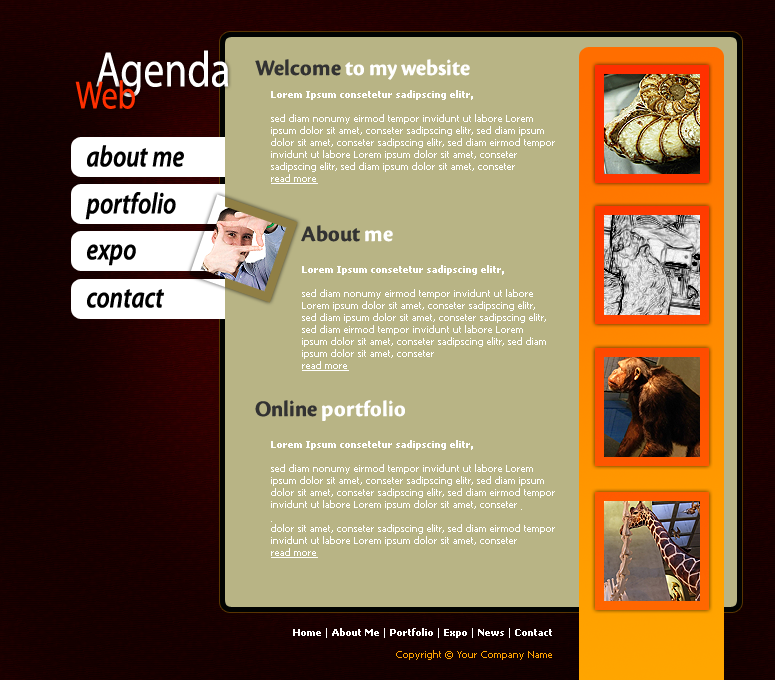
<style>
.page{position:relative;width:775px;height:680px;background:#b8b485}
.page>*{position:absolute;margin:0}
.t1{font:50.2px "MyriadPro-Regular";color:#ffffff;scale:0.83 1}
.t2{font:39.3px "MyriadPro-Regular";color:#ff2f00;scale:0.83 1}
.t3{font:10px "Tahoma";color:#ffffff}
.t4{font:10px "Tahoma-Bold";color:#ffffff}
.t5{font:10px "Tahoma";color:#ffffff;text-decoration:underline}
.t6{font:29.6px "MyriadPro-SemiboldIt";color:#000000;scale:0.83 1}
.t7{font:23px "CronosPro-BoldSubh";color:#323232}
.t8{font:23px "CronosPro-BoldSubh";color:#ffffff}
.t9{font:10px "Tahoma";color:#ffa200}
</style>
<div class="page">
<p class="t1" style="left:96px;top:50px;width:133px;height:47px">Agenda</p>
<p class="t2" style="left:75px;top:80px;width:60px;height:29px">Web</p>
<p class="t3" style="left:271px;top:90px;width:284px;height:94px"><span class="t4">Lorem Ipsum consetetur sadipscing elitr,</span> <br><br>sed diam nonumy eirmod tempor invidunt ut labore Lorem ipsum dolor sit amet, conseter sadipscing elitr, sed diam ipsum dolor sit amet, conseter sadipscing elitr, sed diam eirmod tempor invidunt ut labore Lorem ipsum dolor sit amet, conseter sadipscing elitr, sed diam ipsum dolor sit amet, conseter <br><span class="t5">read more</span></p>
<p class="t6" style="left:87px;top:145px;width:97px;height:22px">about me</p>
<p class="t6" style="left:85px;top:192px;width:91px;height:28px">portfolio</p>
<p class="t7" style="left:301px;top:225px;width:92px;height:17px">About <span class="t8">me</span></p>
<p class="t6" style="left:87px;top:244px;width:49px;height:22px">expo</p>
<p class="t3" style="left:302px;top:265px;width:244px;height:106px"><span class="t4">Lorem Ipsum consetetur sadipscing elitr,</span> <br><br>sed diam nonumy eirmod tempor invidunt ut labore Lorem ipsum dolor sit amet, conseter sadipscing elitr, sed diam ipsum dolor sit amet, conseter sadipscing elitr, sed diam eirmod tempor invidunt ut labore Lorem ipsum dolor sit amet, conseter sadipscing elitr, sed diam ipsum dolor sit amet, conseter <br><span class="t5">read more</span></p>
<p class="t6" style="left:87px;top:289px;width:77px;height:19px">contact</p>
<p class="t3" style="left:271px;top:440px;width:284px;height:118px"><span class="t4">Lorem Ipsum consetetur sadipscing elitr,</span> <br><br>sed diam nonumy eirmod tempor invidunt ut labore Lorem ipsum dolor sit amet, conseter sadipscing elitr, sed diam ipsum dolor sit amet, conseter sadipscing elitr, sed diam eirmod tempor invidunt ut labore Lorem ipsum dolor sit amet, conseter <br><br>dolor sit amet, conseter sadipscing elitr, sed diam eirmod tempor invidunt ut labore Lorem ipsum dolor sit amet, conseter <br><span class="t5">read more</span></p>
<p class="t4" style="left:293px;top:628px;width:259px;height:10px"><span class="t3">  </span>Home <span class="t3">| </span>About Me <span class="t3">| </span>Portfolio <span class="t3">| </span>Expo <span class="t3">| </span>News <span class="t3">| </span>Contact</p>
<p class="t9" style="left:396px;top:650px;width:156px;height:10px">Copyright © Your Company Name</p>
</div>
